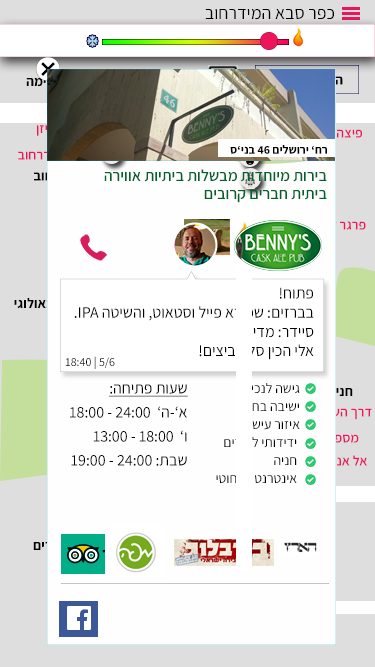
<style>
.page{position:relative;width:375px;height:667px;background:#fffefe}
.page>*{position:absolute;margin:0}
.t1{font:18px "Assistant-Regular";color:#000000}
.t2{font:14px "Assistant-Bold"}
.t3{font:12px "Assistant-Bold";color:#000000}
.t4{font:14px "Assistant-SemiBold"}
.t5{font:16px/18px "Assistant-SemiBold";color:#00632d}
.t6{font:16px "Assistant-Regular";color:#000000}
.t7{font:12px "Assistant-Regular";color:#000000}
.t8{font:16px/24px "Assistant-Regular";color:#000000}
.t9{font:16px/24px "Assistant-Regular";color:#000000;text-decoration:underline}
.t10{font:14px/18px "Assistant-Regular";color:#000000}
.t11{font:14px "Assistant-Regular";color:#000000}
.t12{font:14px "Assistant-Bold";color:#000000}
</style>
<div class="page">
<p class="t1" style="left:205px;top:9px;width:129px;height:11px">כפר סבא המידרחוב</p>
<p class="t2" style="left:26px;top:78px;width:37px;height:9px">רשימה</p>
<p class="t3" style="left:230px;top:145px;width:97px;height:9px">רח’ ירושלים 46 בני’ס</p>
<p class="t4" style="left:18px;top:151px;width:75px;height:12px">קפה המדרחוב</p>
<p class="t5" style="left:104px;top:169px;width:223px;height:34px">בירות מיוחדות מבשלות ביתיות אווירה<br>ביתית חברים קרובים</p>
<p class="t6" style="left:74px;top:287px;width:240px;height:73px">פתוח!<br>בברזים: שפירא פייל וסטאוט, והשיטה IPA.<br>סיידר: מדיום.<br>אלי הכין סלט ביצים!</p>
<p class="t7" style="left:65px;top:356px;width:50px;height:13px">5/6 | 18:40</p>
<p class="t8" style="left:70px;top:384px;width:118px;height:82px"><span class="t9">שעות פתיחה:<br></span>א’-ה’  24:00 - 18:00<br>ו’  18:00 - 13:00<br>שבת: 24:00 - 19:00</p>
<p class="t10" style="left:216px;top:383px;width:84px;height:101px">גישה לנכים<br>ישיבה בחוץ<br>איזור עישון<br> ידידותי לילדים<br> חניה<br> אינטרנט אלחוט<span class="t11">י</span></p>
<p class="t12" style="left:329px;top:387px;width:24px;height:12px">חניון</p>
<p class="t4" style="left:313px;top:408px;width:59px;height:12px">דרך השמש</p>
<p class="t4" style="left:320px;top:434px;width:39px;height:9px">מספרה</p>
<p class="t4" style="left:320px;top:455px;width:47px;height:11px">אל אנד וי</p>
</div>
